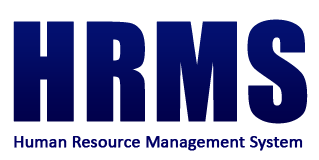
<style>
.page{position:relative;width:319px;height:160px;background:#ffffff}
.page>*{position:absolute;margin:0}
.t1{font:124.8px "Impact";color:#010066;font-weight:bold}
.t2{font:17.5px "Calibri";color:#010066;font-weight:bold}
</style>
<div class="page">
<p class="t1" style="left:13px;top:19px;width:295px;height:105px">HRMS</p>
<p class="t2" style="left:14px;top:136px;width:289px;height:15px">Human Resource Management System</p>
</div>
